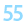
<style>
.page{position:relative;width:26px;height:26px;background:#ffffff}
.page>*{position:absolute;margin:0}
.t1{font:24px "MyriadPro-Semibold";letter-spacing:-0.075em;color:#8dd9ff;scale:0.9 1}
</style>
<div class="page">
<p class="t1" style="left:3px;top:5px;width:20px;height:16px">55</p>
</div>
